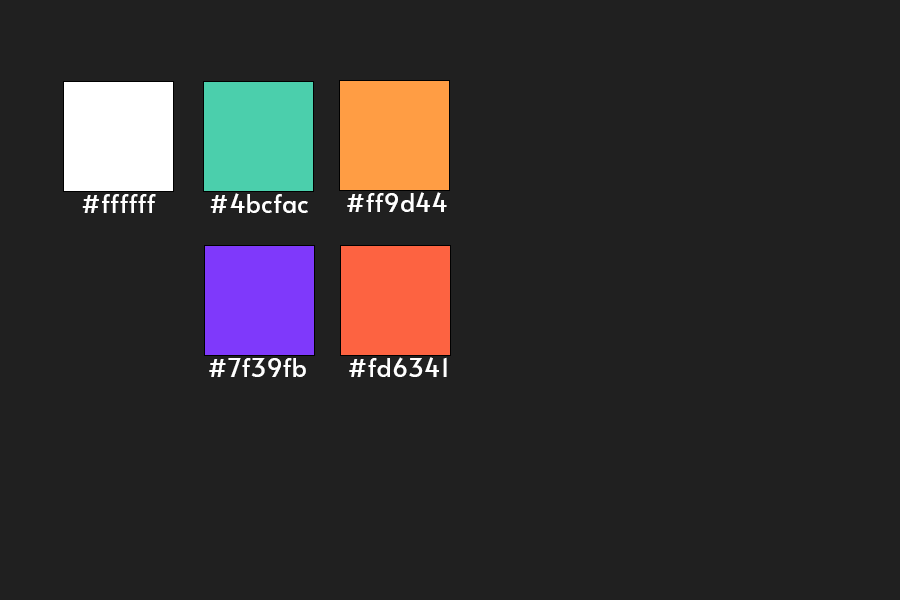
<style>
.page{position:relative;width:900px;height:600px;background:#202020}
.page>*{position:absolute;margin:0}
.t1{font:25px "Alata-Regular";color:#ffffff}
</style>
<div class="page">
<p class="t1" style="left:82px;top:194px;width:74px;height:19px">#ffffff</p>
<p class="t1" style="left:210px;top:193px;width:98px;height:20px">#4bcfac</p>
<p class="t1" style="left:347px;top:192px;width:100px;height:20px">#ff9d44</p>
<p class="t1" style="left:209px;top:358px;width:97px;height:19px">#7f39fb</p>
<p class="t1" style="left:349px;top:357px;width:98px;height:20px">#fd6341</p>
</div>
